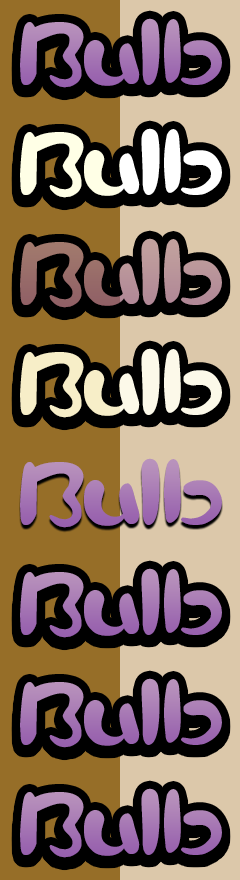
<style>
.page{position:relative;width:240px;height:880px;background:#000000}
.page>*{position:absolute;margin:0}
.t1{font:90px "Pikmin";color:#a677b4}
.t2{font:90px "Pikmin"}
</style>
<div class="page">
<p class="t1" style="left:20px;top:18px;width:202px;height:70px">Bulb</p>
<p class="t2" style="left:20px;top:128px;width:202px;height:70px">Bulb</p>
<p class="t2" style="left:20px;top:238px;width:202px;height:70px">Bulb</p>
<p class="t2" style="left:20px;top:348px;width:202px;height:70px">Bulb</p>
<p class="t1" style="left:20px;top:458px;width:202px;height:70px">Bulb</p>
<p class="t1" style="left:20px;top:568px;width:202px;height:70px">Bulb</p>
<p class="t1" style="left:20px;top:788px;width:202px;height:70px">Bulb</p>
</div>
